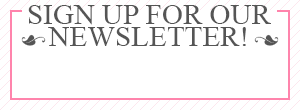
<style>
.page{position:relative;width:300px;height:110px;background:#ffffff}
.page>*{position:absolute;margin:0}
.t1{font:29px/22px "TimesNewRomanPSMT";color:#555555;text-transform:uppercase}
.t2{font:19.7px "TypeEmbellishmentsOneLetPlain";color:#555555}
</style>
<div class="page">
<p class="t1" style="left:28px;top:5px;width:243px;height:42px;text-align:center">Sign up for our<br>newsletter!</p>
<p class="t2" style="left:21px;top:34px;width:25px;height:12px;rotate:180deg">n</p>
<p class="t2" style="left:254px;top:34px;width:25px;height:12px">n</p>
</div>
